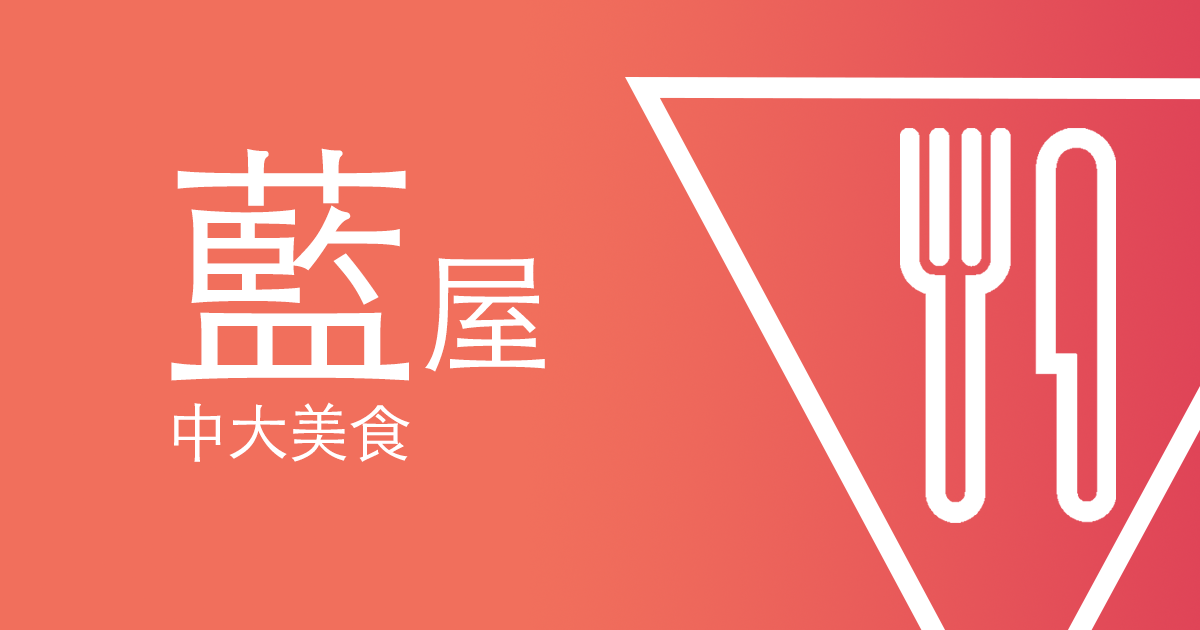
<style>
.page{position:relative;width:1200px;height:630px;background:#f16f5c}
.page>*{position:absolute;margin:0}
.t1{font:266.7px "STHeitiTC-Light";letter-spacing:-0.02em;color:#ffffff}
.t2{font:133.3px "STHeitiTC-Light";letter-spacing:-0.02em;color:#ffffff}
.t3{font:62.2px "STHeitiTC-Light";letter-spacing:-0.02em;color:#ffffff}
</style>
<div class="page">
<p class="t1" style="left:171px;top:148px;width:374px;height:233px">藍<span class="t2">屋</span></p>
<p class="t3" style="left:174px;top:402px;width:236px;height:60px">中大美食</p>
</div>
